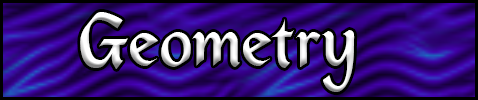
<style>
.page{position:relative;width:478px;height:100px}
.page>*{position:absolute;margin:0}
.t1{font:80px "DS_Mysticora";color:#ffffff}
</style>
<div class="page">
<p class="t1" style="left:80px;top:12px;width:275px;height:80px">Geometry</p>
</div>
